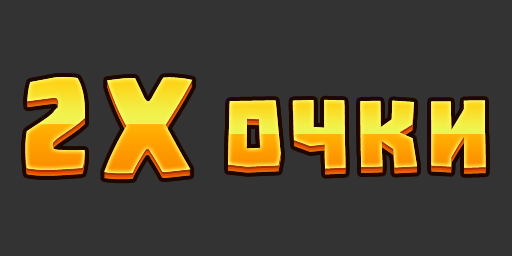
<style>
.page{position:relative;width:512px;height:256px;background:#333333}
.page>*{position:absolute;margin:0}
.t1{font:97.3px "Supercell-Magic";letter-spacing:0.06em}
.t2{font:106.7px "Troika";letter-spacing:0.06em}
</style>
<div class="page">
<p class="t1" style="left:25px;top:77px;width:168px;height:97px">2X</p>
<p class="t2" style="left:228px;top:99px;width:258px;height:70px">ОЧКИ</p>
</div>
